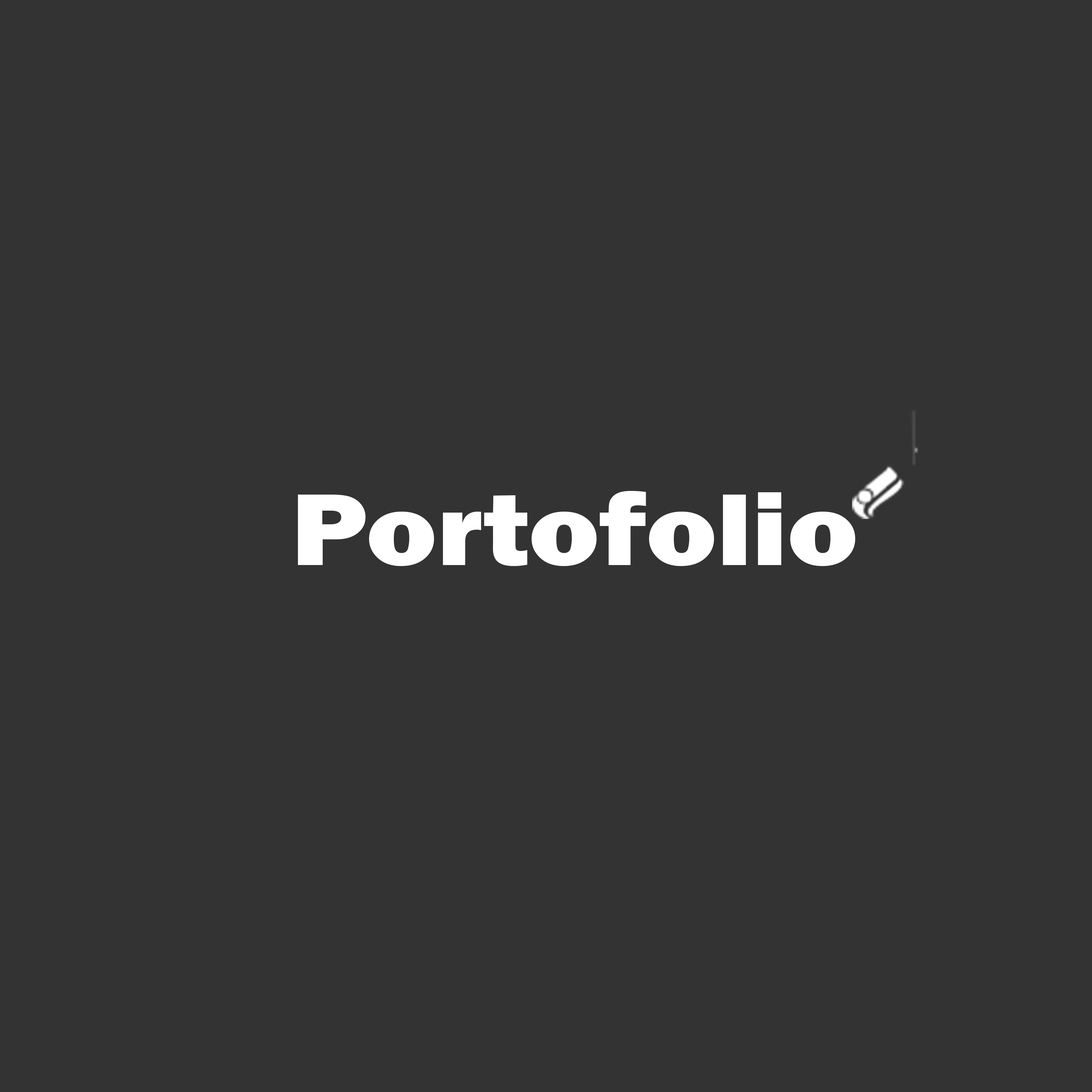
<style>
.page{position:relative;width:1092px;height:1092px;background:#333333}
.page>*{position:absolute;margin:0}
.t1{font:105.7px "FranklinGothic-Heavy";color:#ffffff;scale:1.13 1}
</style>
<div class="page">
<p class="t1" style="left:298px;top:491px;width:557px;height:75px">Portofolio</p>
</div>
